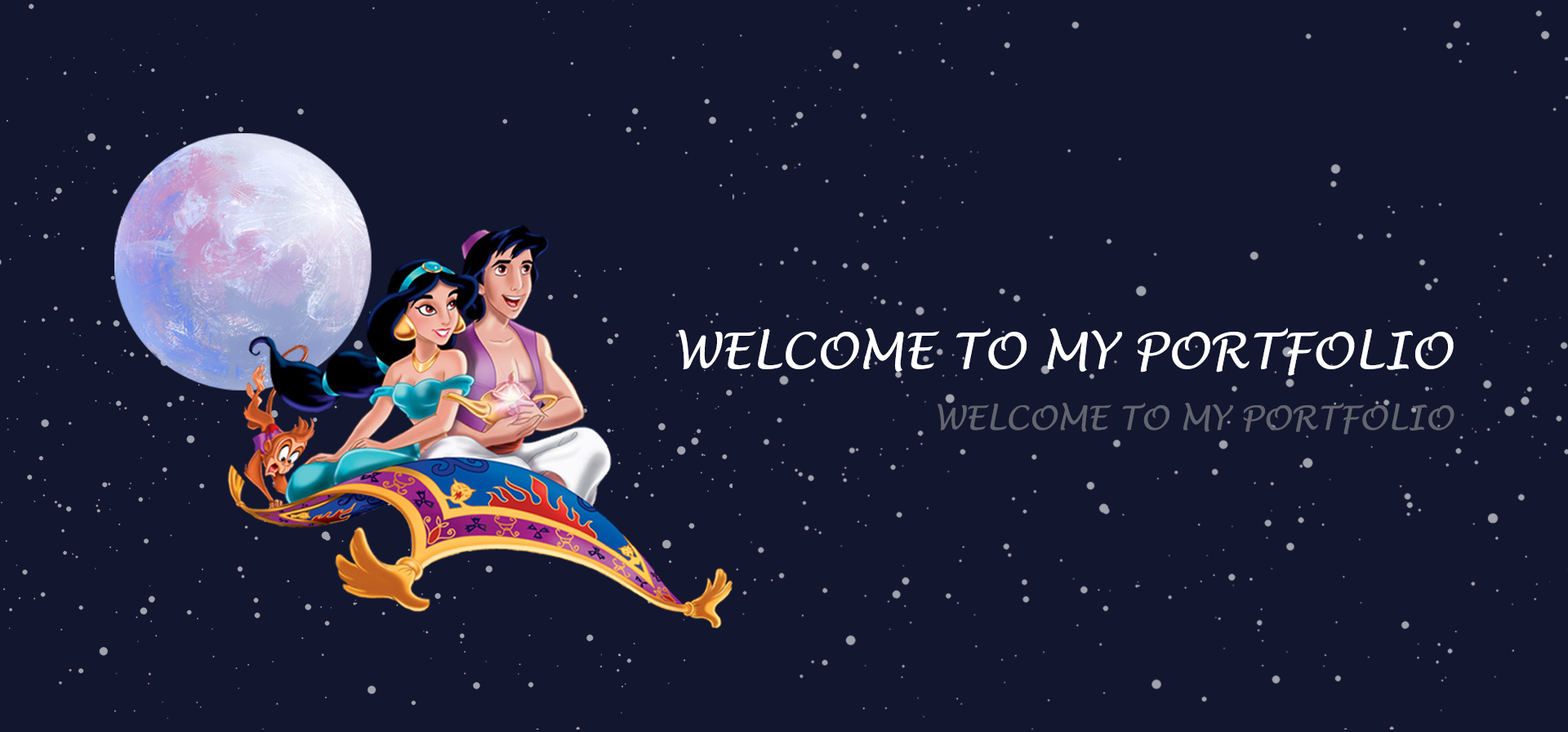
<style>
.page{position:relative;width:1568px;height:732px;background:#12162f}
.page>*{position:absolute;margin:0}
.t1{font:49px "LucidaHandwriting-Italic";color:#ffffff;text-transform:uppercase}
.t2{font:32.7px "LucidaHandwriting-Italic";color:#62656e;text-transform:uppercase}
</style>
<div class="page">
<p class="t1" style="left:678px;top:327px;width:776px;height:49px">Welcome to my portfolio</p>
<p class="t2" style="left:937px;top:402px;width:517px;height:32px">Welcome to my portfolio</p>
</div>
